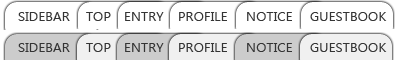
<style>
.page{position:relative;width:400px;height:60px;background:#ffffff}
.page>*{position:absolute;margin:0}
.t1{font:13.3px "MalgunGothicRegular";color:#343434}
</style>
<div class="page">
<p class="t1" style="left:18px;top:12px;width:52px;height:9px">SIDEBAR</p>
<p class="t1" style="left:86px;top:12px;width:25px;height:9px">TOP</p>
<p class="t1" style="left:125px;top:12px;width:39px;height:9px">ENTRY</p>
<p class="t1" style="left:179px;top:12px;width:48px;height:9px">PROFILE</p>
<p class="t1" style="left:247px;top:12px;width:45px;height:9px">NOTICE</p>
<p class="t1" style="left:310px;top:12px;width:77px;height:9px">GUESTBOOK</p>
<p class="t1" style="left:18px;top:43px;width:52px;height:9px">SIDEBAR</p>
<p class="t1" style="left:86px;top:43px;width:25px;height:9px">TOP</p>
<p class="t1" style="left:125px;top:43px;width:39px;height:9px">ENTRY</p>
<p class="t1" style="left:179px;top:43px;width:48px;height:9px">PROFILE</p>
<p class="t1" style="left:247px;top:43px;width:45px;height:9px">NOTICE</p>
<p class="t1" style="left:310px;top:43px;width:77px;height:9px">GUESTBOOK</p>
</div>
